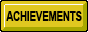
<style>
.page{position:relative;width:88px;height:32px;background:#e0c820}
.page>*{position:absolute;margin:0}
.t1{font:14px "Arial-BoldMT";color:#000000;scale:0.68 1}
</style>
<div class="page">
<p class="t1" style="left:6px;top:11px;width:76px;height:10px">ACHIEVEMENTS</p>
</div>
